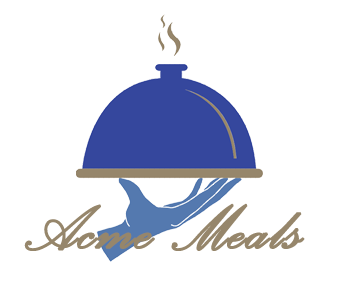
<style>
.page{position:relative;width:352px;height:286px;background:#ffffff}
.page>*{position:absolute;margin:0}
.t1{font:80px "PalaceScriptMT";color:#96866b;font-weight:bold}
</style>
<div class="page">
<p class="t1" style="left:24px;top:203px;width:281px;height:48px">Acme Meals</p>
</div>
